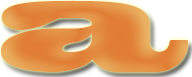
<style>
.page{position:relative;width:192px;height:77px}
.page>*{position:absolute;margin:0}
.t1{font:133.3px "BlackoakStd";color:#e38a40}
.t2{font:242.2px "BlackoakStd";color:#e38a40}
</style>
<div class="page">
<p class="t1" style="left:1px;top:0px;width:187px;height:73px"><span class="t2"> </span>a</p>
</div>
